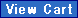
<style>
.page{position:relative;width:78px;height:18px;background:#2d6dc5}
.page>*{position:absolute;margin:0}
.t1{font:14px "ArialNarrow";letter-spacing:0.1em;color:#ffffff;font-weight:bold}
</style>
<div class="page">
<p class="t1" style="left:6px;top:4px;width:66px;height:10px">View Cart</p>
</div>
